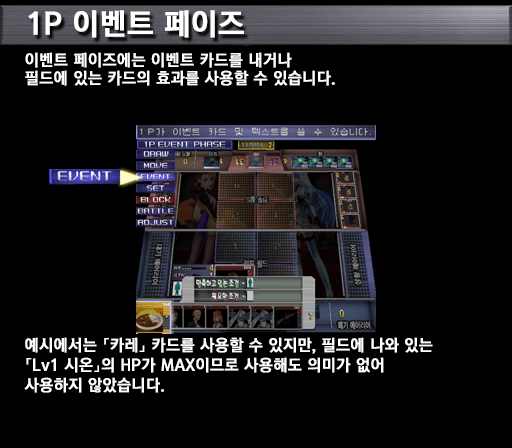
<style>
.page{position:relative;width:512px;height:448px;background:#000000}
.page>*{position:absolute;margin:0}
.t1{font:30px "KoreanGD15-R";color:#ffffff;font-weight:bold}
.t2{font:16px/18px "KoreanGD15-R";color:#ffffff;font-weight:bold}
.t3{font:16px/20px "KoreanGD15-R";color:#ffffff;font-weight:bold}
</style>
<div class="page">
<p class="t1" style="left:28px;top:10px;width:216px;height:28px">1P 이벤트 페이즈</p>
<p class="t2" style="left:25px;top:52px;width:310px;height:34px">이벤트 페이즈에는 이벤트 카드를 내거나<br>필드에 있는 카드의 효과를 사용할 수 있습니다.</p>
<p class="t3" style="left:24px;top:337px;width:409px;height:56px">예시에서는 「카레」 카드를 사용할 수 있지만, 필드에 나와 있는<br>「Lv1 시온」의 HP가 MAX이므로 사용해도 의미가 없어<br>사용하지 않았습니다.</p>
</div>
